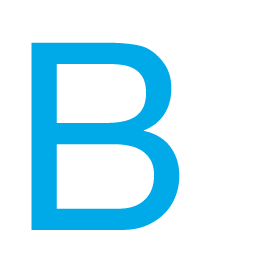
<style>
.page{position:relative;width:260px;height:260px;background:#ffffff}
.page>*{position:absolute;margin:0}
.t1{font:262px "HelveticaNeue";color:#00a9e8}
</style>
<div class="page">
<p class="t1" style="left:31px;top:42px;width:149px;height:188px">B</p>
</div>
